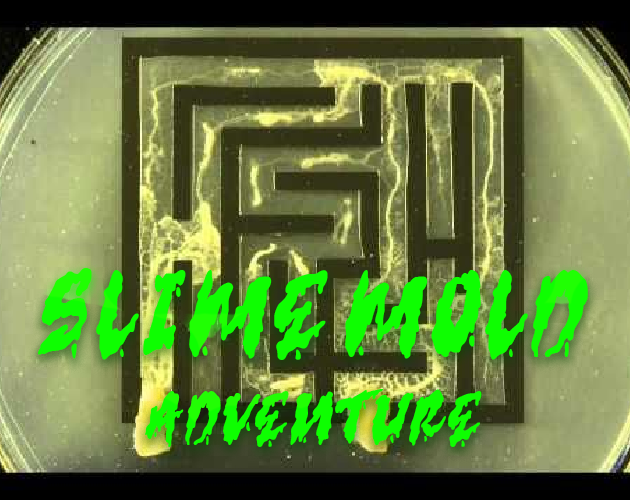
<style>
.page{position:relative;width:630px;height:500px}
.page>*{position:absolute;margin:0}
.t1{font:99.4px "serremdemo";color:#0efe01;text-transform:uppercase}
.t2{font:62px "serremdemo";color:#0efe01;text-transform:uppercase}
</style>
<div class="page">
<p class="t1" style="left:38px;top:268px;width:550px;height:92px">Slime Mold</p>
<p class="t2" style="left:145px;top:389px;width:337px;height:58px">Adventure</p>
</div>
